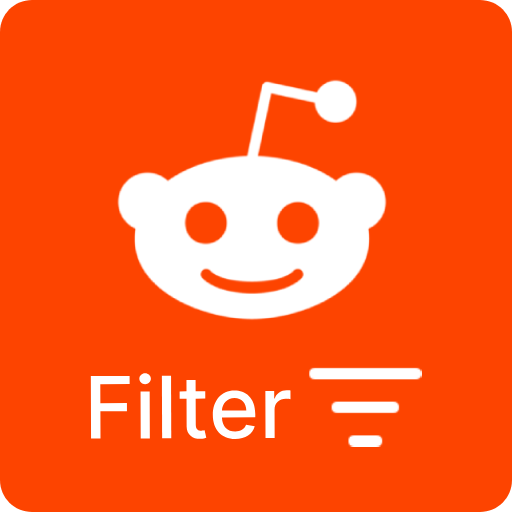
<style>
.page{position:relative;width:512px;height:512px;background:#fd4400}
.page>*{position:absolute;margin:0}
.t1{font:86px "Inter-Medium";color:#ffffff}
</style>
<div class="page">
<p class="t1" style="left:90px;top:373px;width:201px;height:67px">Filter</p>
</div>
